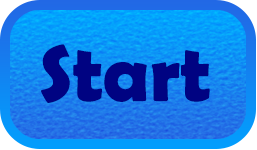
<style>
.page{position:relative;width:257px;height:150px}
.page>*{position:absolute;margin:0}
.t1{font:80px "BerlinSansFBDemi-Bold";color:#000382}
</style>
<div class="page">
<p class="t1" style="left:41px;top:44px;width:169px;height:59px">Start</p>
</div>
